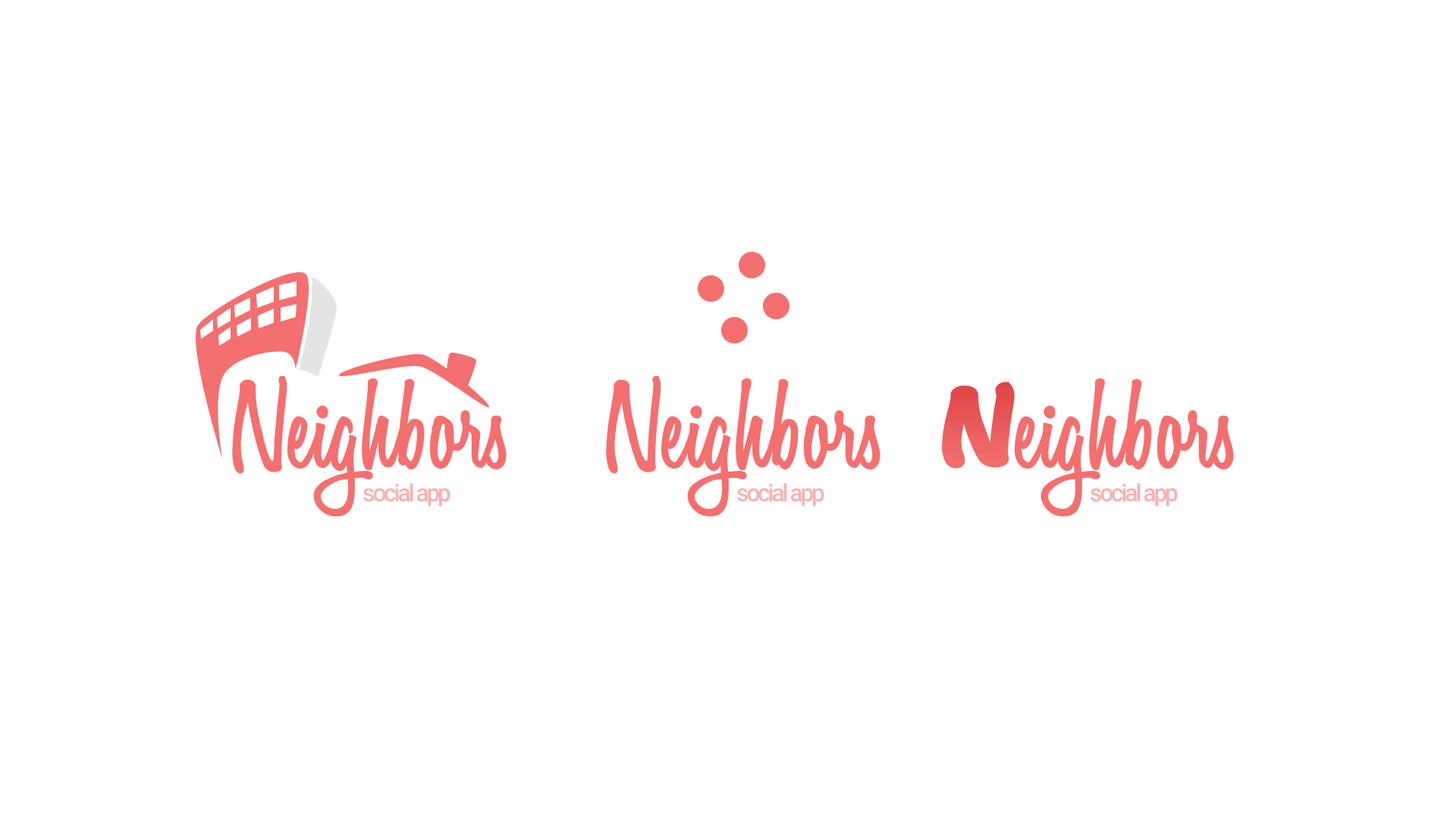
<style>
.page{position:relative;width:1456px;height:819px;background:#ffffff}
.page>*{position:absolute;margin:0}
.t1{font:118.1px "VarianeScript";color:#f46f6f}
.t2{font:92.9px "VarianeScript";color:#e95454;font-weight:bold;scale:1.47 1}
.t3{font:24.1px "Roboto-Medium";letter-spacing:-0.1em;color:#f8b1b1}
</style>
<div class="page">
<p class="t1" style="left:232px;top:376px;width:275px;height:140px">Neighbors</p>
<p class="t1" style="left:606px;top:376px;width:274px;height:140px">Neighbors</p>
<p class="t2" style="left:942px;top:381px;width:73px;height:88px">N</p>
<p class="t1" style="left:1015px;top:378px;width:219px;height:138px">eighbors</p>
<p class="t3" style="left:363px;top:483px;width:87px;height:24px">social app</p>
<p class="t3" style="left:737px;top:483px;width:87px;height:24px">social app</p>
<p class="t3" style="left:1090px;top:483px;width:88px;height:24px">social app</p>
</div>
